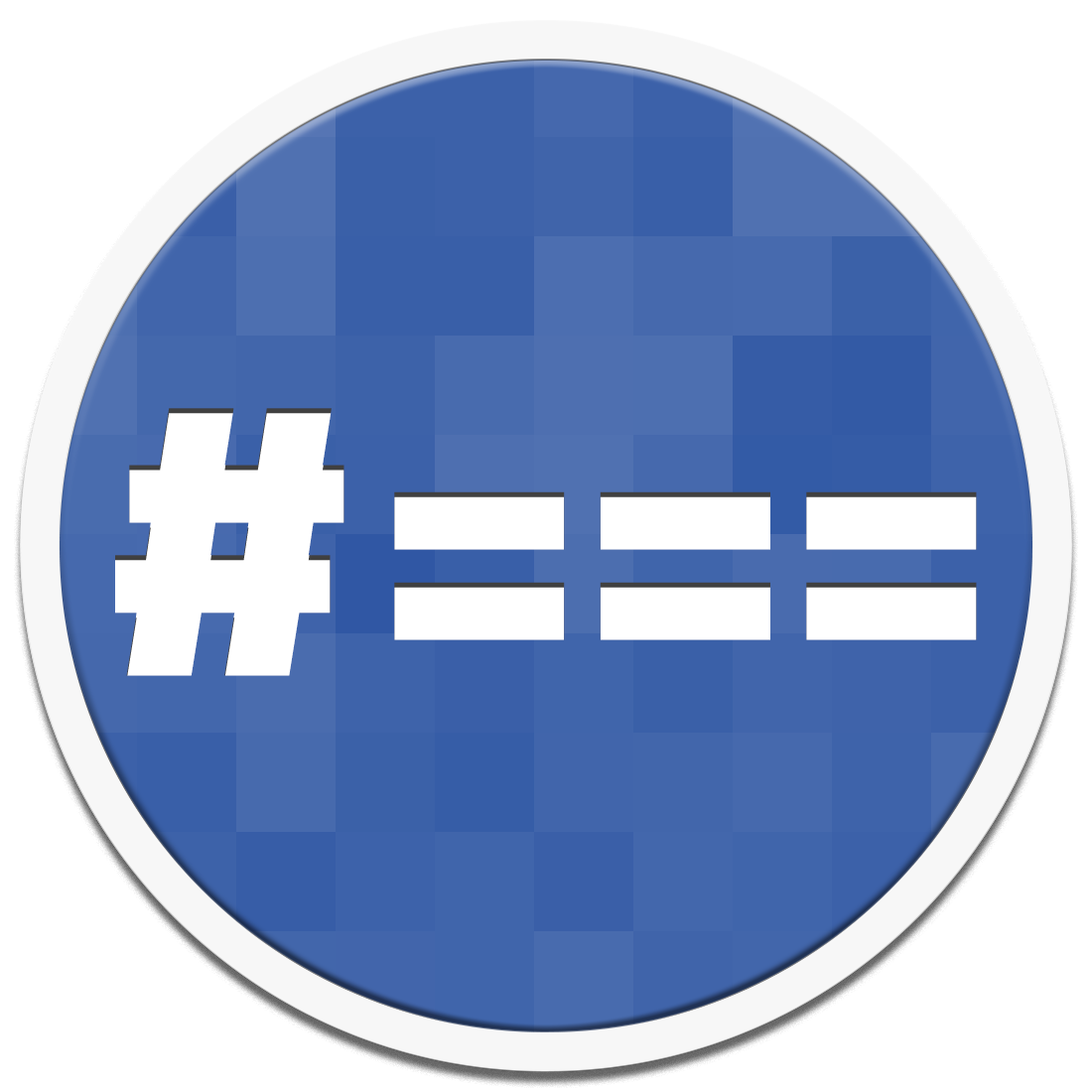
<style>
.page{position:relative;width:1092px;height:1092px;background:#ffffff}
.page>*{position:absolute;margin:0}
.t1{font:370.6px "DINPro-Black";color:#ffffff}
</style>
<div class="page">
<p class="t1" style="left:115px;top:408px;width:862px;height:268px">#===</p>
</div>
